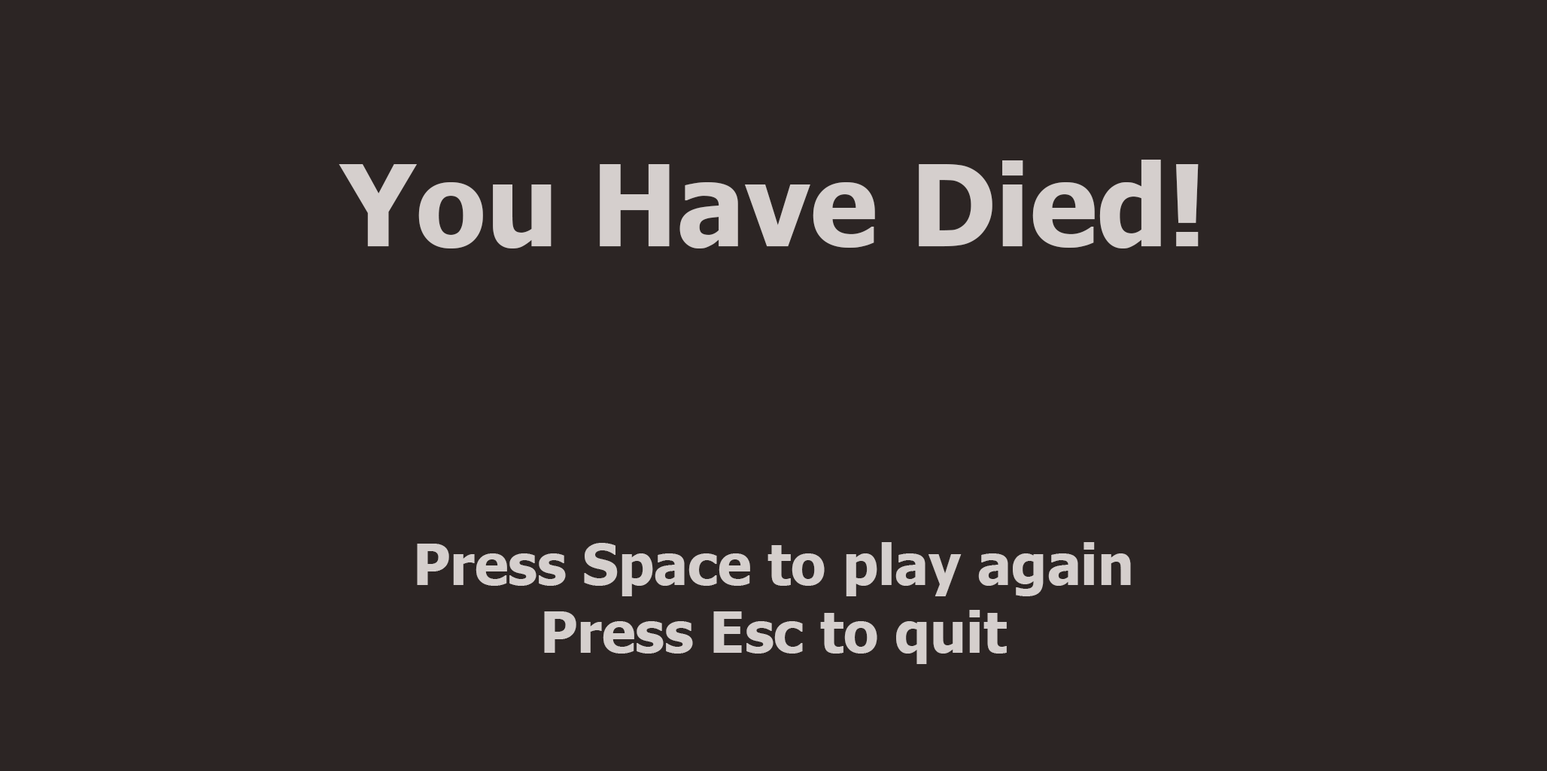
<style>
.page{position:relative;width:1547px;height:771px;background:#2c2524}
.page>*{position:absolute;margin:0}
.t1{font:56.4px "Tahoma-Bold";color:#d5cfcd}
.t2{font:112.9px "Tahoma-Bold";color:#d5cfcd}
</style>
<div class="page">
<p class="t1" style="left:339px;top:160px;width:860px;height:504px;text-align:center"><span class="t2">You Have Died!<br><br><br></span>Press Space to play again<br>Press Esc to quit</p>
</div>
